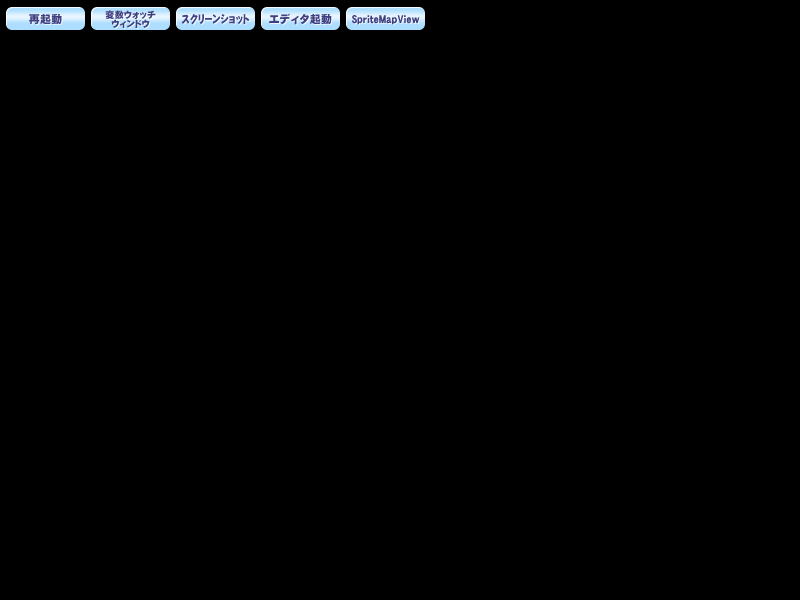
<style>
.page{position:relative;width:800px;height:600px;background:#000000}
.page>*{position:absolute;margin:0}
.t1{font:11px "DFGothic-EB-WING-RKSJ-H";letter-spacing:0.05em;color:#404080}
.t2{font:9px/9px "DFGothic-EB-WING-RKSJ-H";letter-spacing:0.05em;color:#404080}
.t3{font:11px "DFGothic-EB-WING-RKSJ-H";letter-spacing:0.05em;color:#404080;scale:0.8 1}
</style>
<div class="page">
<p class="t1" style="left:29px;top:14px;width:33px;height:11px">再起動</p>
<p class="t2" style="left:105px;top:10px;width:51px;height:18px;text-align:center">変数ウォッチ<br>ウィンドウ</p>
<p class="t3" style="left:181px;top:14px;width:69px;height:11px">スクリーンショット</p>
<p class="t1" style="left:269px;top:13px;width:63px;height:12px">エディタ起動</p>
<p class="t3" style="left:352px;top:15px;width:68px;height:10px">SpriteMapView</p>
</div>
